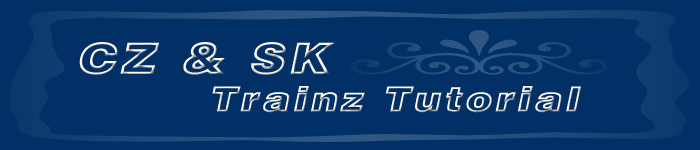
<style>
.page{position:relative;width:700px;height:150px;background:#003066}
.page>*{position:absolute;margin:0}
.t1{font:33.3px/37.5px "Swiss721BT-BlackOutline";letter-spacing:0.08em;color:#ffffff;font-weight:bold;font-style:italic;scale:1.19 1}
.t2{font:41.7px/37.5px "Swiss721BT-BlackOutline";letter-spacing:0.08em;color:#ffffff;font-weight:bold;font-style:italic;scale:1.19 1}
</style>
<div class="page">
<p class="t1" style="left:79px;top:42px;width:502px;height:71px"><span class="t2">CZ &amp; SK<br>       </span>Trainz Tutorial</p>
</div>
